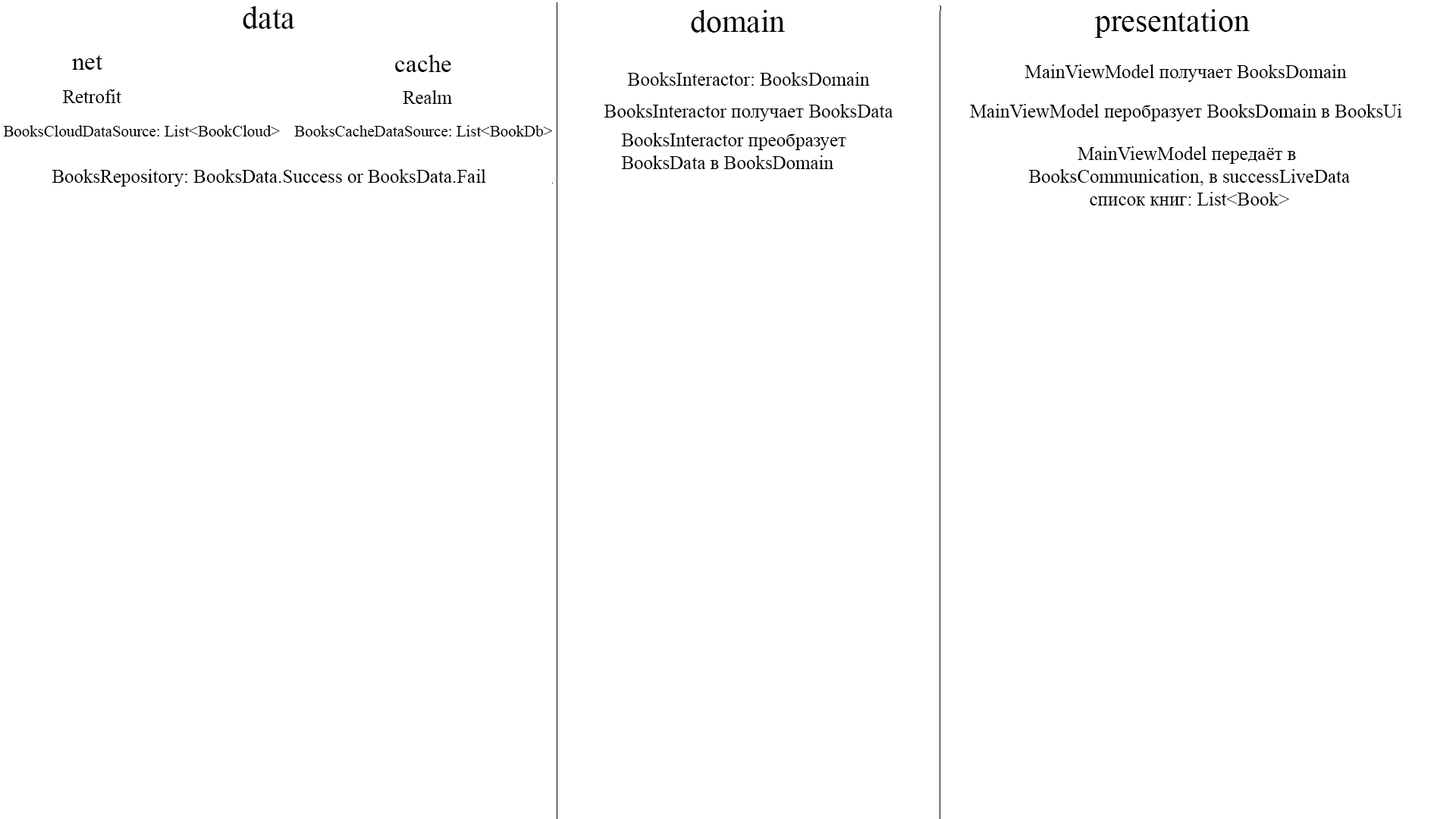
<style>
.page{position:relative;width:1456px;height:819px;background:#ffffff}
.page>*{position:absolute;margin:0}
.t1{font:31.6px "TimesNewRomanPSMT";color:#000000}
.t2{font:25.3px "TimesNewRomanPSMT";color:#000000}
.t3{font:19px "TimesNewRomanPSMT";color:#000000}
.t4{font:15.8px "TimesNewRomanPSMT";color:#000000}
</style>
<div class="page">
<p class="t1" style="left:243px;top:6px;width:52px;height:23px">data</p>
<p class="t1" style="left:691px;top:10px;width:94px;height:23px">domain</p>
<p class="t1" style="left:1094px;top:9px;width:156px;height:29px">presentation</p>
<p class="t2" style="left:72px;top:55px;width:30px;height:15px">net</p>
<p class="t2" style="left:395px;top:55px;width:56px;height:17px">cache</p>
<p class="t3" style="left:1024px;top:64px;width:323px;height:18px">MainViewModel получает BooksDomain</p>
<p class="t3" style="left:627px;top:72px;width:243px;height:14px">BooksInteractor: BooksDomain</p>
<p class="t3" style="left:62px;top:89px;width:59px;height:14px">Retrofit</p>
<p class="t3" style="left:403px;top:90px;width:49px;height:14px">Realm</p>
<p class="t3" style="left:604px;top:104px;width:289px;height:17px">BooksInteractor получает BooksData</p>
<p class="t3" style="left:970px;top:104px;width:432px;height:17px">MainViewModel перобразует BooksDomain в BooksUi</p>
<p class="t4" style="left:3px;top:125px;width:277px;height:11px">BooksCloudDataSource: List&lt;BookCloud&gt;</p>
<p class="t4" style="left:294px;top:125px;width:258px;height:11px">BooksCacheDataSource: List&lt;BookDb&gt;</p>
<p class="t3" style="left:621px;top:133px;width:225px;height:36px">BooksInteractor преобразует <br>BooksData в BooksDomain</p>
<p class="t3" style="left:1028px;top:146px;width:323px;height:60px;text-align:center">MainViewModel передаёт в <br>BooksCommunication, в successLiveData<br>список книг: List&lt;Book&gt;</p>
<p class="t3" style="left:52px;top:169px;width:434px;height:18px">BooksRepository: BooksData.Success or BooksData.Fail</p>
</div>
